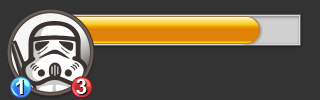
<style>
.page{position:relative;width:320px;height:100px;background:#333333}
.page>*{position:absolute;margin:0}
.t1{font:21px "Arial-BoldMT";color:#ffffff}
</style>
<div class="page">
<p class="t1" style="left:16px;top:79px;width:7px;height:15px">1</p>
<p class="t1" style="left:76px;top:79px;width:11px;height:15px">3</p>
</div>
